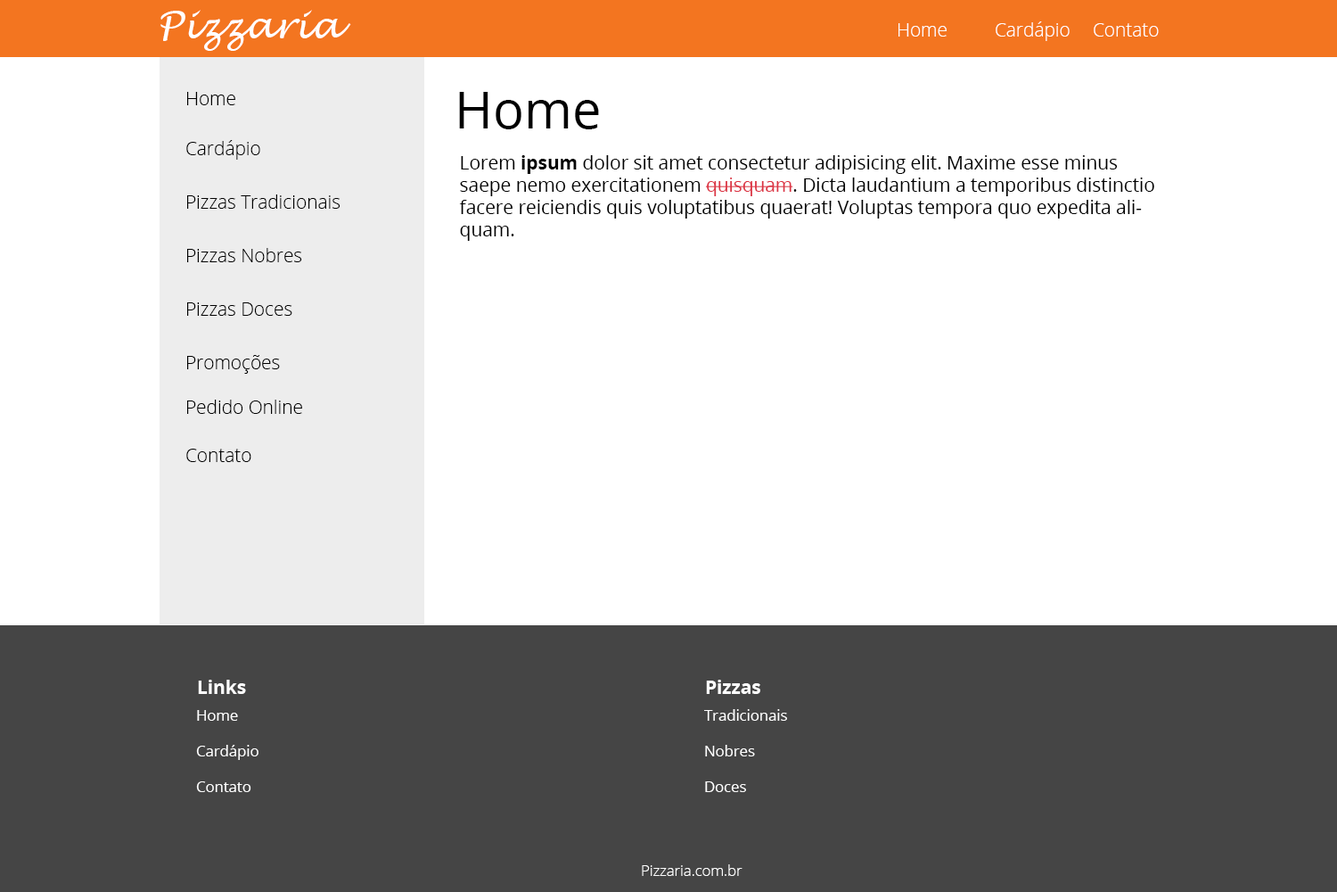
<style>
.page{position:relative;width:1337px;height:892px;background:#ffffff}
.page>*{position:absolute;margin:0}
.t1{font:37.2px "LucidaHandwriting-Italic";color:#ffffff}
.t2{font:18.6px "OpenSans-Light";color:#ffffff}
.t3{font:18.6px "OpenSans-Light";color:#000000}
.t4{font:52px "OpenSans";color:#000000}
.t5{font:18.6px "OpenSans";color:#000000}
.t6{font:18.6px "OpenSans-Bold";color:#000000}
.t7{font:18.6px "OpenSans";color:#dc3545}
.t8{font:18.6px "OpenSans-Bold";color:#ffffff}
.t9{font:14.9px "OpenSans";color:#ffffff}
.t10{font:14.9px "OpenSans-Light";color:#ffffff}
</style>
<div class="page">
<p class="t1" style="left:160px;top:10px;width:191px;height:41px">Pizzaria</p>
<p class="t2" style="left:899px;top:23px;width:48px;height:14px">Home</p>
<p class="t2" style="left:996px;top:21px;width:74px;height:20px">Cardápio</p>
<p class="t2" style="left:1094px;top:23px;width:65px;height:14px">Contato</p>
<p class="t3" style="left:187px;top:92px;width:48px;height:13px">Home</p>
<p class="t4" style="left:459px;top:92px;width:140px;height:37px">Home</p>
<p class="t3" style="left:186px;top:140px;width:74px;height:20px">Cardápio</p>
<p class="t5" style="left:459px;top:155px;width:696px;height:86px">Lorem <span class="t6">ipsum </span>dolor sit amet consectetur adipisicing elit. Maxime esse minus saepe nemo exercitationem <span class="t7">quisquam</span>. Dicta laudantium a temporibus distinctio facere reiciendis quis voluptatibus quaerat! Voluptas tempora quo expedita aliquam.</p>
<p class="t3" style="left:187px;top:194px;width:154px;height:15px">Pizzas Tradicionais</p>
<p class="t3" style="left:187px;top:248px;width:115px;height:14px">Pizzas Nobres</p>
<p class="t3" style="left:187px;top:302px;width:105px;height:14px">Pizzas Doces</p>
<p class="t3" style="left:187px;top:355px;width:93px;height:19px">Promoções</p>
<p class="t3" style="left:187px;top:399px;width:115px;height:15px">Pedido Online</p>
<p class="t3" style="left:186px;top:448px;width:65px;height:14px">Contato</p>
<p class="t8" style="left:198px;top:679px;width:48px;height:15px">Links</p>
<p class="t8" style="left:706px;top:679px;width:55px;height:15px">Pizzas</p>
<p class="t9" style="left:197px;top:710px;width:41px;height:10px">Home</p>
<p class="t9" style="left:704px;top:709px;width:83px;height:11px">Tradicionais</p>
<p class="t9" style="left:196px;top:744px;width:63px;height:16px">Cardápio</p>
<p class="t9" style="left:705px;top:744px;width:50px;height:12px">Nobres</p>
<p class="t9" style="left:196px;top:781px;width:55px;height:11px">Contato</p>
<p class="t9" style="left:705px;top:781px;width:41px;height:11px">Doces</p>
<p class="t10" style="left:642px;top:864px;width:101px;height:12px">Pizzaria.com.br</p>
</div>
